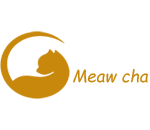
<style>
.page{position:relative;width:150px;height:130px;background:#ffffff}
.page>*{position:absolute;margin:0}
.t1{font:16.8px "ComicSansMS-Italic";color:#c8880b}
</style>
<div class="page">
<p class="t1" style="left:73px;top:69px;width:76px;height:14px">Meaw cha</p>
</div>
